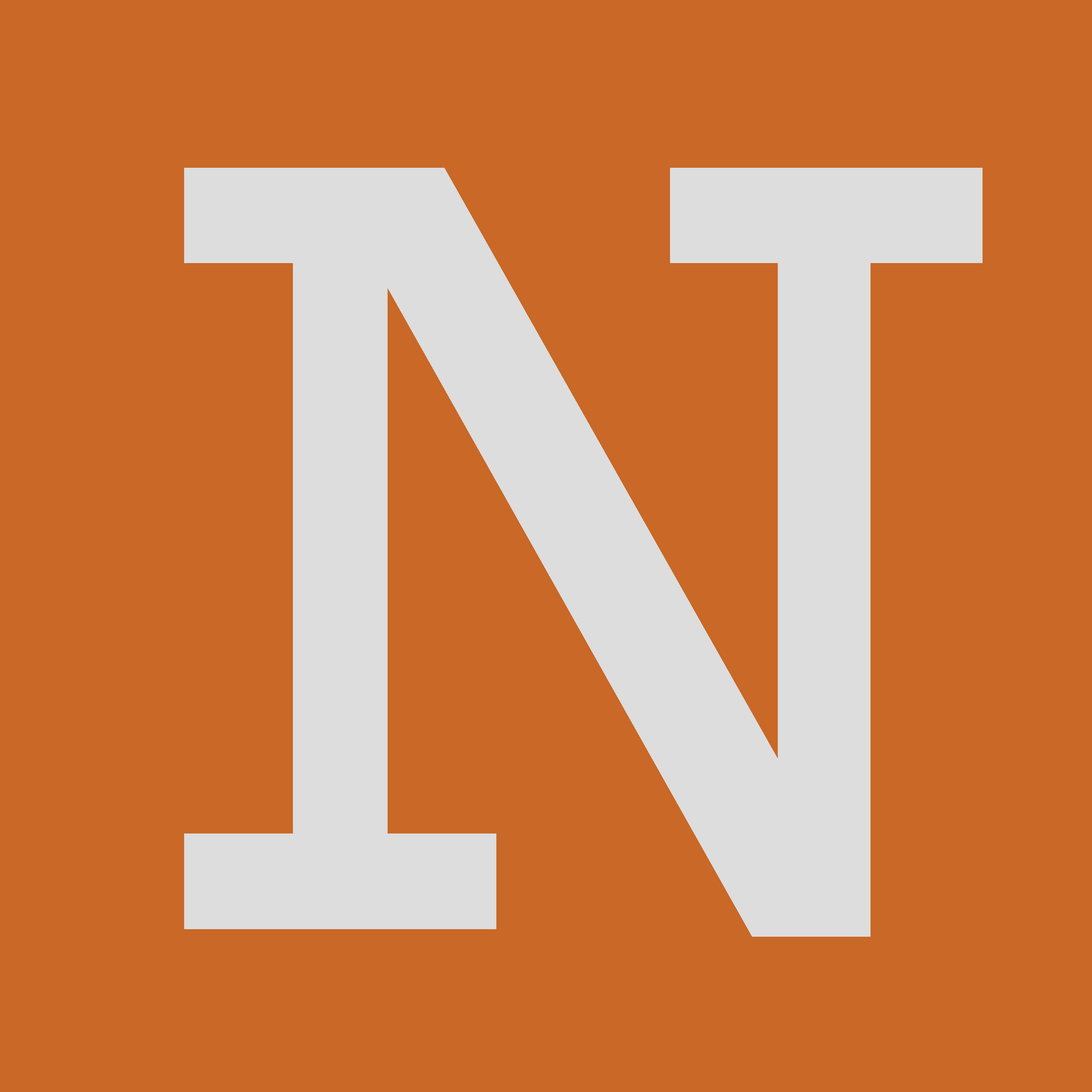
<style>
.page{position:relative;width:1092px;height:1092px;background:#c96827}
.page>*{position:absolute;margin:0}
.t1{font:1120.4px "Rockwell";color:#dddddd}
</style>
<div class="page">
<p class="t1" style="left:184px;top:168px;width:799px;height:769px">N</p>
</div>
